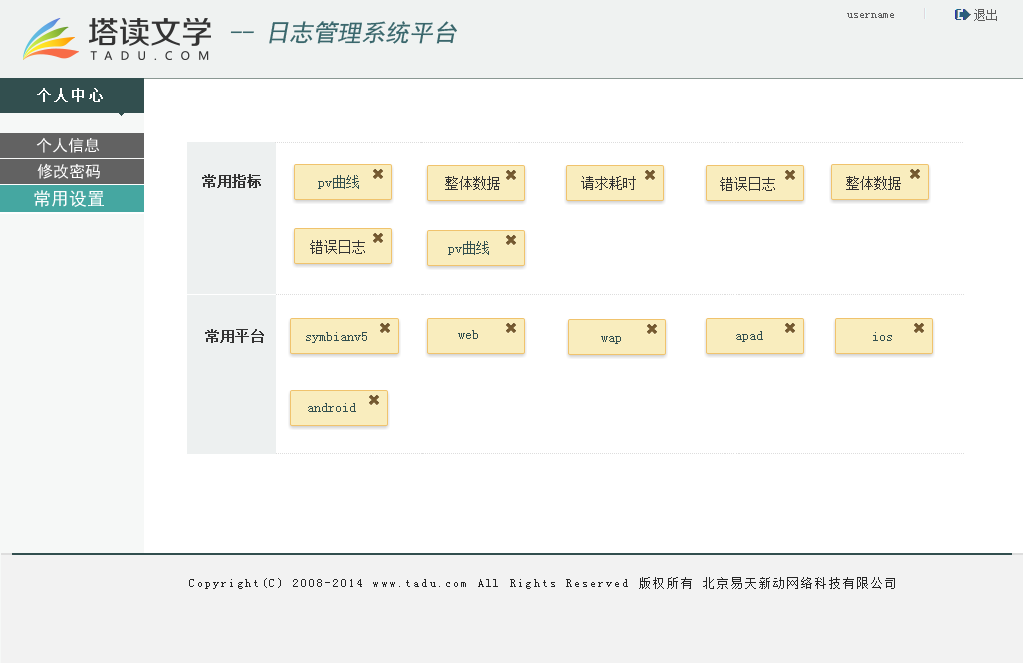
<style>
.page{position:relative;width:1023px;height:663px;background:#ffffff}
.page>*{position:absolute;margin:0}
.t1{font:12px "SimSun";color:#5c5c5c}
.t2{font:24px "SimHei";color:#3a676c;font-style:italic}
.t3{font:14px "SimSun";letter-spacing:0.2em;color:#ffffff;font-weight:bold}
.t4{font:16px "SimHei";color:#ffffff}
.t5{font:14px "SimSun";color:#333333;font-weight:bold}
.t6{font:14px "SimSun";color:#324f4f}
.t7{font:14px "SimSun";color:#333333}
.t8{font:18px "SimHei";color:#ffffff}
.t9{font:12px "SimSun";letter-spacing:0.2em;color:#252525}
</style>
<div class="page">
<p class="t1" style="left:847px;top:13px;width:47px;height:5px">username</p>
<p class="t1" style="left:974px;top:9px;width:23px;height:12px">退出</p>
<p class="t2" style="left:230px;top:21px;width:227px;height:23px">-- 日志管理系统平台</p>
<p class="t3" style="left:37px;top:88px;width:66px;height:14px">个人中心</p>
<p class="t4" style="left:36px;top:137px;width:64px;height:16px">个人信息</p>
<p class="t4" style="left:37px;top:163px;width:63px;height:16px">修改密码</p>
<p class="t5" style="left:202px;top:174px;width:59px;height:14px">常用指标</p>
<p class="t6" style="left:318px;top:175px;width:41px;height:14px">pv曲线</p>
<p class="t7" style="left:445px;top:176px;width:55px;height:14px">整体数据</p>
<p class="t7" style="left:581px;top:176px;width:55px;height:14px">请求耗时</p>
<p class="t7" style="left:720px;top:177px;width:55px;height:14px">错误日志</p>
<p class="t7" style="left:846px;top:176px;width:55px;height:14px">整体数据</p>
<p class="t8" style="left:34px;top:190px;width:70px;height:17px">常用设置</p>
<p class="t7" style="left:310px;top:240px;width:55px;height:14px">错误日志</p>
<p class="t6" style="left:448px;top:241px;width:41px;height:14px">pv曲线</p>
<p class="t5" style="left:205px;top:329px;width:59px;height:14px">常用平台</p>
<p class="t6" style="left:306px;top:332px;width:61px;height:11px">symbianv5</p>
<p class="t6" style="left:458px;top:330px;width:20px;height:9px">web</p>
<p class="t6" style="left:601px;top:336px;width:20px;height:8px">wap</p>
<p class="t6" style="left:736px;top:331px;width:27px;height:11px">apad</p>
<p class="t6" style="left:873px;top:332px;width:19px;height:9px">ios</p>
<p class="t6" style="left:308px;top:403px;width:48px;height:9px">android</p>
<p class="t9" style="left:189px;top:577px;width:706px;height:12px">Copyright(C) 2008-2014 www.tadu.com All Rights Reserved 版权所有 北京易天新动网络科技有限公司</p>
</div>
